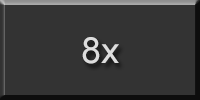
<style>
.page{position:relative;width:200px;height:100px;background:#333333}
.page>*{position:absolute;margin:0}
.t1{font:36px "ArialMT";color:#dddddd}
</style>
<div class="page">
<p class="t1" style="left:82px;top:37px;width:37px;height:27px">8x</p>
</div>
